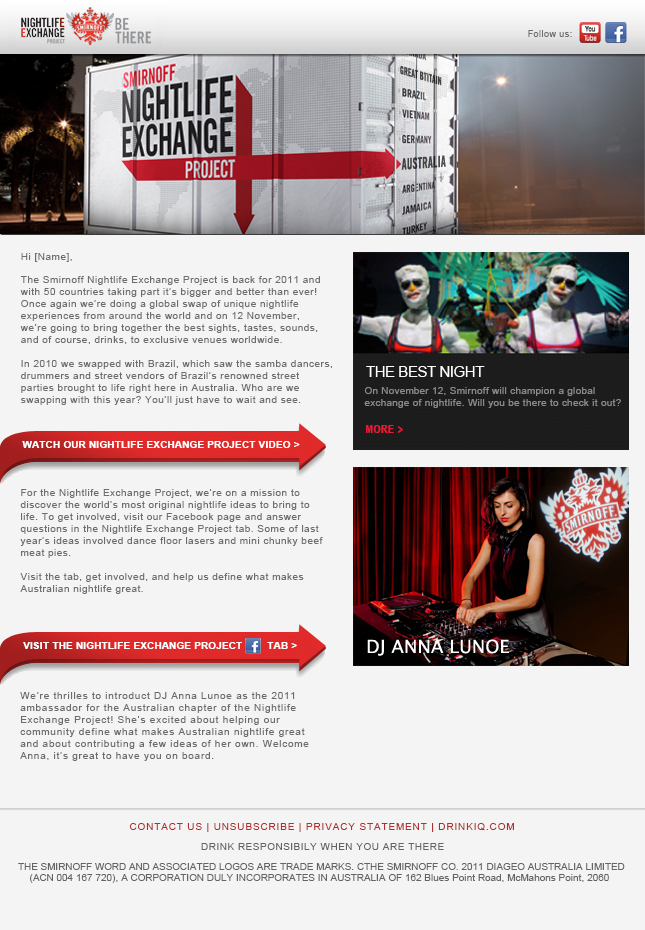
<style>
.page{position:relative;width:645px;height:930px;background:#f4f4f4}
.page>*{position:absolute;margin:0}
.t1{font:9px "ArialMT";letter-spacing:0.05em;color:#6d6d6d}
.t2{font:10px "ArialMT";letter-spacing:0.05em;color:#6d6d6d}
.t3{font:10px/12px "ArialMT";letter-spacing:0.05em;color:#6d6d6d}
.t4{font:15px "ArialMT";letter-spacing:-0.03em;color:#ffffff}
.t5{font:9.5px/12px "ArialMT";letter-spacing:0.05em;color:#898a8f}
.t6{font:11px "ArialNarrow-Bold";letter-spacing:0.05em;color:#e61c34}
.t7{font:9.5px "Arial-BoldMT";letter-spacing:0.05em;color:#ffffff}
.t8{font:10px/12px "ArialMT";letter-spacing:0.075em;color:#6b6b6b}
.t9{font:10px "ArialMT";letter-spacing:0.085em;color:#b0302f}
.t10{font:10px "ArialMT";letter-spacing:0.05em;color:#646464}
.t11{font:9.5px/11px "ArialMT";letter-spacing:0.025em;color:#646464}
</style>
<div class="page">
<p class="t1" style="left:528px;top:30px;width:44px;height:7px">Follow us:</p>
<p class="t2" style="left:21px;top:253px;width:51px;height:9px">Hi [Name],</p>
<p class="t3" style="left:20px;top:276px;width:312px;height:129px">The Smirnoff Nightlife Exchange Project is back for 2011 and with 50 countries taking part it’s bigger and better than ever! Once again we’re doing a global swap of unique nightlife experiences from around the world and on 12 November,    we’re going to bring together the best sights, tastes, sounds, and of course, drinks, to exclusive venues worldwide.<br><br>In 2010 we swapped with Brazil, which saw the samba dancers, drummers and street vendors of Brazil’s renowned street  parties brought to life right here in Australia. Who are we swapping with this year? You’ll just have to wait and see.</p>
<p class="t4" style="left:366px;top:366px;width:119px;height:11px">THE BEST NIGHT</p>
<p class="t5" style="left:364px;top:387px;width:257px;height:21px">On November 12, Smirnoff will champion a global exchange of nightlife. Will you be there to check it out?</p>
<p class="t6" style="left:366px;top:425px;width:37px;height:8px">MORE &gt;</p>
<p class="t7" style="left:22px;top:441px;width:278px;height:7px">WATCH OUR NIGHTLIFE EXCHANGE PROJECT VIDEO &gt;</p>
<p class="t3" style="left:20px;top:489px;width:303px;height:105px">For the Nightlife Exchange Project, we’re on a mission to discover the world’s most original nightlife ideas to bring to life. To get involved, visit our Facebook page and answer questions in the Nightlife Exchange Project tab. Some of last year’s ideas involved dance floor lasers and mini chunky beef meat pies.<br><br>Visit the tab, get involved, and help us define what makes Australian nightlife great.</p>
<p class="t7" style="left:23px;top:642px;width:274px;height:7px">VISIT THE NIGHTLIFE EXCHANGE PROJECT        TAB &gt;</p>
<p class="t8" style="left:20px;top:692px;width:289px;height:69px">We’re thrilles to introduct DJ Anna Lunoe as the 2011 ambassador for the Australian chapter of the Nightlife Exchange Project! She’s excited about helping our community define what makes Australian nightlife great and about contributing a few ideas of her own. Welcome Anna, it’s great to have you on board.</p>
<p class="t9" style="left:129px;top:823px;width:385px;height:9px">CONTACT US | UNSUBSCRIBE | PRIVACY STATEMENT | DRINKIQ.COM</p>
<p class="t10" style="left:201px;top:843px;width:243px;height:7px">DRINK RESPONSIBILY WHEN YOU ARE THERE</p>
<p class="t11" style="left:18px;top:863px;width:607px;height:20px">THE SMIRNOFF WORD AND ASSOCIATED LOGOS ARE TRADE MARKS. CTHE SMIRNOFF CO. 2011 DIAGEO AUSTRALIA LIMITED<br>    (ACN 004 167 720), A CORPORATION DULY INCORPORATES IN AUSTRALIA OF 162 Blues Point Road, McMahons Point, 2060</p>
</div>
